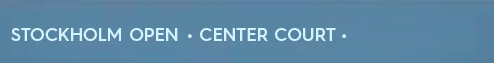
<style>
.page{position:relative;width:494px;height:63px}
.page>*{position:absolute;margin:0}
.t1{font:18px "HurmeGeometricSans4-SemiBold";color:#d3f3fd}
</style>
<div class="page">
<p class="t1" style="left:11px;top:28px;width:167px;height:13px">STOCKHOLM OPEN</p>
<p class="t1" style="left:188px;top:28px;width:158px;height:13px">• CENTER COURT •</p>
</div>
